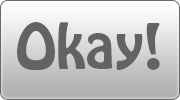
<style>
.page{position:relative;width:180px;height:100px}
.page>*{position:absolute;margin:0}
.t1{font:55px "HoboStd";color:#636363}
</style>
<div class="page">
<p class="t1" style="left:17px;top:22px;width:143px;height:48px">Okay!</p>
</div>
